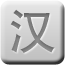
<style>
.page{position:relative;width:65px;height:65px}
.page>*{position:absolute;margin:0}
.t1{font:48px "AdobeHeitiStd-Regular";color:#7e7e7e}
</style>
<div class="page">
<p class="t1" style="left:10px;top:9px;width:45px;height:44px">汉</p>
</div>
